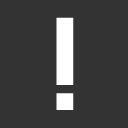
<style>
.page{position:relative;width:128px;height:128px;background:#333333}
.page>*{position:absolute;margin:0}
.t1{font:128px "Orbitron-Bold";letter-spacing:-0.01em;color:#ffffff}
</style>
<div class="page">
<p class="t1" style="left:56px;top:17px;width:18px;height:93px">!</p>
</div>
